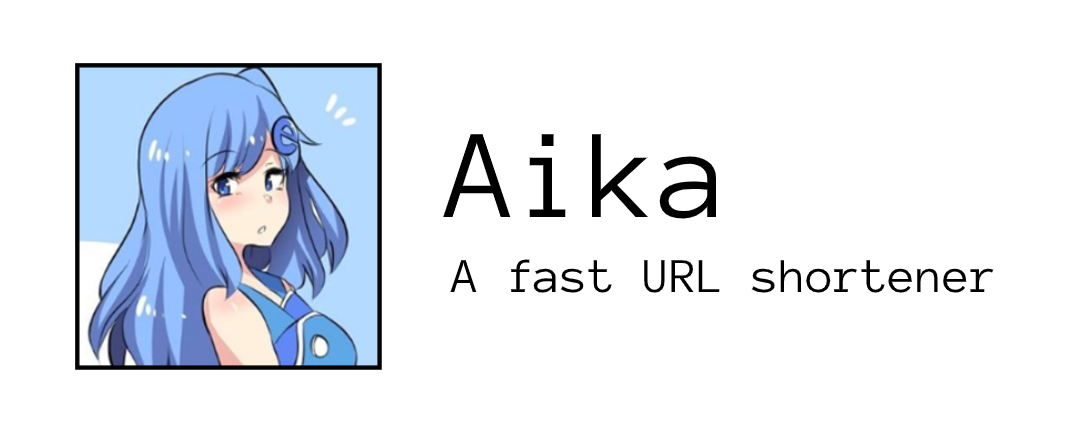
<style>
.page{position:relative;width:1068px;height:432px;background:#ffffff}
.page>*{position:absolute;margin:0}
.t1{font:130px "AnonymousPro-Regular";color:#000000}
.t2{font:50px "AnonymousPro-Regular";color:#000000}
</style>
<div class="page">
<p class="t1" style="left:443px;top:134px;width:273px;height:85px">Aika</p>
<p class="t2" style="left:450px;top:259px;width:544px;height:34px">A fast URL shortener</p>
</div>
